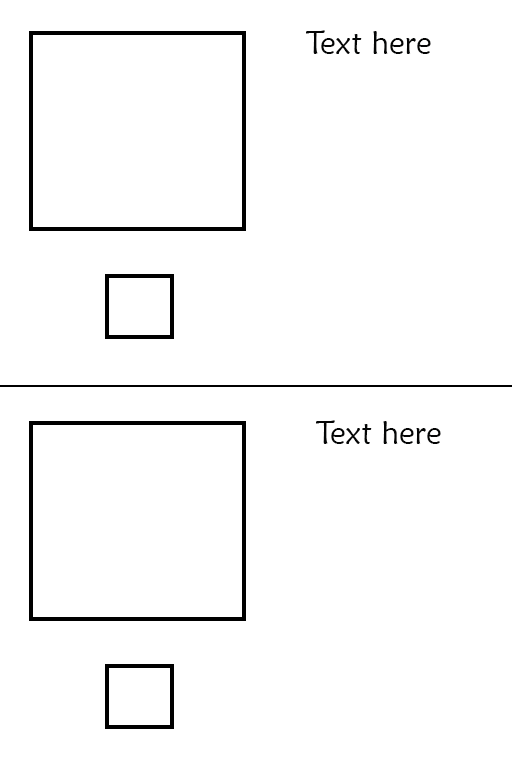
<style>
.page{position:relative;width:512px;height:768px;background:#ffffff}
.page>*{position:absolute;margin:0}
.t1{font:32px "MaiandraGD-Regular";color:#040505}
</style>
<div class="page">
<p class="t1" style="left:306px;top:30px;width:125px;height:24px">Text here</p>
<p class="t1" style="left:316px;top:420px;width:125px;height:24px">Text here</p>
</div>
